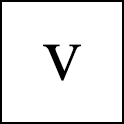
<style>
.page{position:relative;width:124px;height:124px;background:#ffffff}
.page>*{position:absolute;margin:0}
.t1{font:116.8px "Microsoft-Himalaya";color:#000000}
</style>
<div class="page">
<p class="t1" style="left:43px;top:44px;width:38px;height:37px">v</p>
</div>
